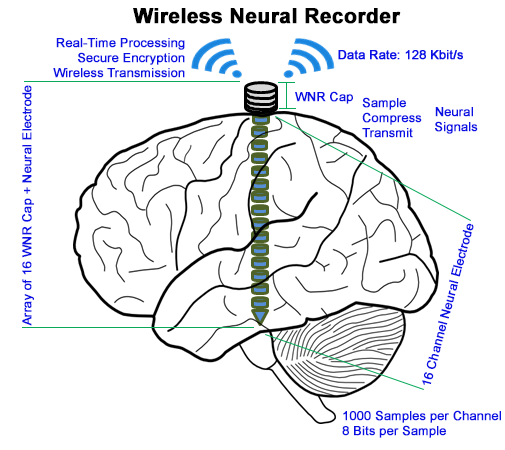
<style>
.page{position:relative;width:505px;height:450px;background:#ffffff}
.page>*{position:absolute;margin:0}
.t1{font:20.8px "Arial-BoldMT";color:#000000;font-weight:bold}
.t2{font:12.5px "ArialMT";color:#0a0fe4;font-weight:bold}
</style>
<div class="page">
<p class="t1" style="left:133px;top:8px;width:268px;height:16px">Wireless Neural Recorder</p>
<p class="t2" style="left:53px;top:38px;width:132px;height:40px;text-align:right">Real-Time Processing<br>Secure Encryption<br>Wireless Transmission</p>
<p class="t2" style="left:22px;top:85px;width:12px;height:241px;rotate:-90deg">Array of 16 WNR Cap + Neural Electrode</p>
<p class="t2" style="left:295px;top:91px;width:58px;height:13px">WNR Cap</p>
<p class="t2" style="left:362px;top:97px;width:60px;height:41px">Sample<br>Compress<br>Transmit</p>
<p class="t2" style="left:435px;top:107px;width:43px;height:27px;text-align:center">Neural <br>Signals</p>
<p class="t2" style="left:422px;top:223px;width:52px;height:162px;rotate:-75deg">16 Channel Neural Electrode</p>
<p class="t2" style="left:342px;top:410px;width:159px;height:28px">1000 Samples per Channel<br>8 Bits per Sample</p>
</div>
